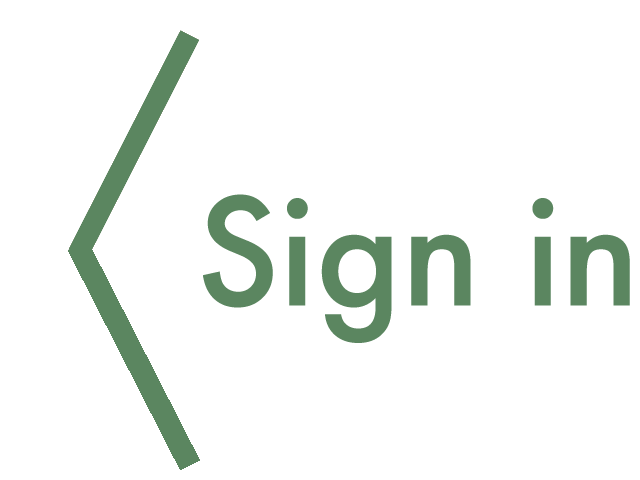
<style>
.page{position:relative;width:640px;height:480px;background:#ffffff}
.page>*{position:absolute;margin:0}
.t1{font:144px "Futura-Medium";color:#5b8660}
</style>
<div class="page">
<p class="t1" style="left:203px;top:194px;width:427px;height:149px">Sign in</p>
</div>
